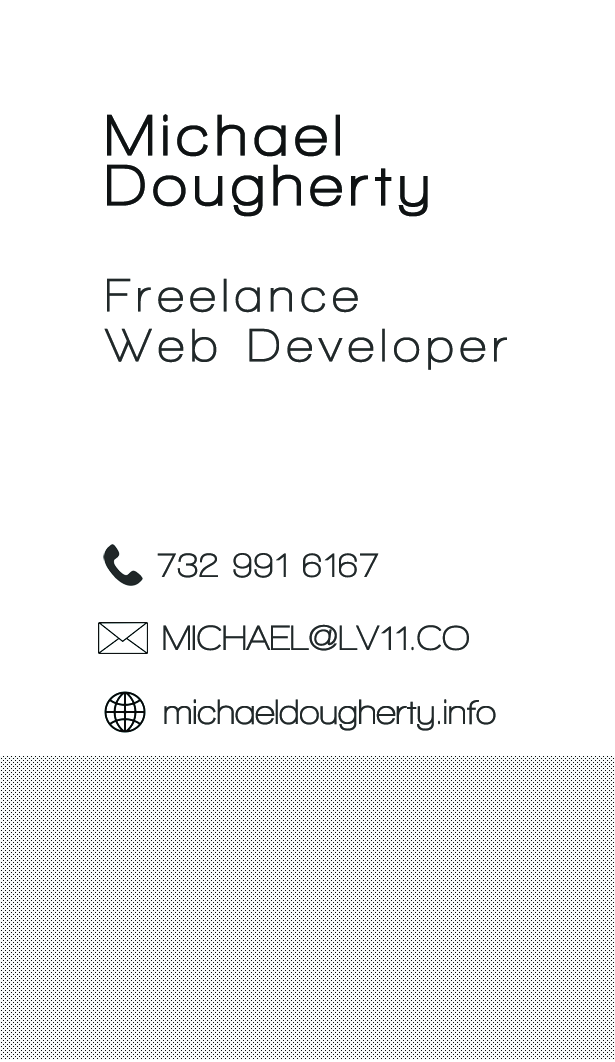
<style>
.page{position:relative;width:615px;height:1062px;background:#ffffff}
.page>*{position:absolute;margin:0}
.t1{font:60px/50px "WalkwayUltraBold";letter-spacing:0.12em;color:#0f1213}
.t2{font:48px/50px "WalkwayBold";letter-spacing:0.14em;color:#212829}
.t3{font:36px "WalkwayBold";color:#212829}
</style>
<div class="page">
<p class="t1" style="left:107px;top:114px;width:321px;height:103px">Michael <br>Dougherty</p>
<p class="t2" style="left:104px;top:278px;width:403px;height:92px">Freelance<br>Web Developer</p>
<p class="t3" style="left:157px;top:553px;width:222px;height:25px">732 991 6167</p>
<p class="t3" style="left:163px;top:624px;width:306px;height:27px">MICHAEL@LV11.CO</p>
<p class="t3" style="left:164px;top:699px;width:332px;height:32px">michaeldougherty.info</p>
</div>
